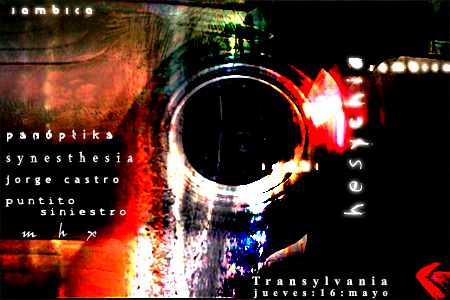
<style>
.page{position:relative;width:450px;height:300px;background:#000000}
.page>*{position:absolute;margin:0}
.t1{font:13.3px "BabyFace";letter-spacing:0.475em;color:#ffffff}
.t2{font:25px "Psycho-Poetry-Regular";letter-spacing:0.475em;color:#ffffff}
.t3{font:16.7px "Sprutfest";letter-spacing:0.475em;color:#ffffff}
.t4{font:14.2px "LaBambaLetPlain";letter-spacing:0.475em;color:#ffffff}
.t5{font:10.4px "TrebuchetMS-Bold";letter-spacing:0.475em;color:#ffffff}
.t6{font:9.6px "X-Files-Regular";letter-spacing:0.475em;color:#ffffff}
.t7{font:16.7px "JohnHandyLetPlain";letter-spacing:0.475em;color:#ffffff}
.t8{font:12.5px "TimesNewRomanPS-BoldMT";letter-spacing:0.475em;color:#ffffff}
.t9{font:10.4px "TimesNewRomanPS-BoldMT";letter-spacing:0.475em;color:#ffffff}
</style>
<div class="page">
<p class="t1" style="left:12px;top:5px;width:80px;height:9px;opacity:0.93">iambica</p>
<p class="t2" style="left:344px;top:58px;width:29px;height:157px;rotate:-90deg">hesychia</p>
<p class="t2" style="left:344px;top:58px;width:29px;height:157px;rotate:-90deg">hesychia</p>
<p class="t1" style="left:370px;top:62px;width:80px;height:9px;opacity:0.93">iambica</p>
<p class="t3" style="left:7px;top:129px;width:106px;height:13px">panóptika</p>
<p class="t4" style="left:6px;top:151px;width:128px;height:15px">synesthesia</p>
<p class="t1" style="left:262px;top:161px;width:56px;height:9px;opacity:0.93">iambi</p>
<p class="t5" style="left:5px;top:175px;width:114px;height:11px">jorge castro</p>
<p class="t6" style="left:5px;top:197px;width:70px;height:10px">puntito</p>
<p class="t6" style="left:40px;top:208px;width:86px;height:8px">siniestro</p>
<p class="t7" style="left:22px;top:222px;width:75px;height:19px">m h x</p>
<p class="t8" style="left:252px;top:276px;width:136px;height:12px">Transylvania</p>
<p class="t9" style="left:253px;top:288px;width:135px;height:11px">jueves:16:mayo</p>
</div>
